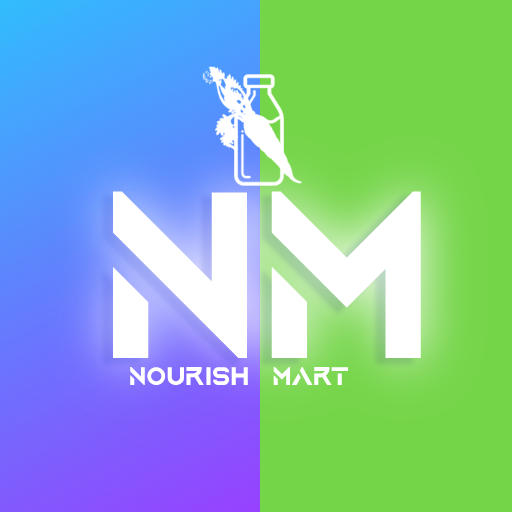
<style>
.page{position:relative;width:512px;height:512px;background:#75d549}
.page>*{position:absolute;margin:0}
.t1{font:27px "AquireBold";color:#ffffff}
</style>
<div class="page">
<p class="t1" style="left:130px;top:367px;width:118px;height:18px">Nourish</p>
<p class="t1" style="left:273px;top:367px;width:75px;height:18px">MART</p>
</div>
